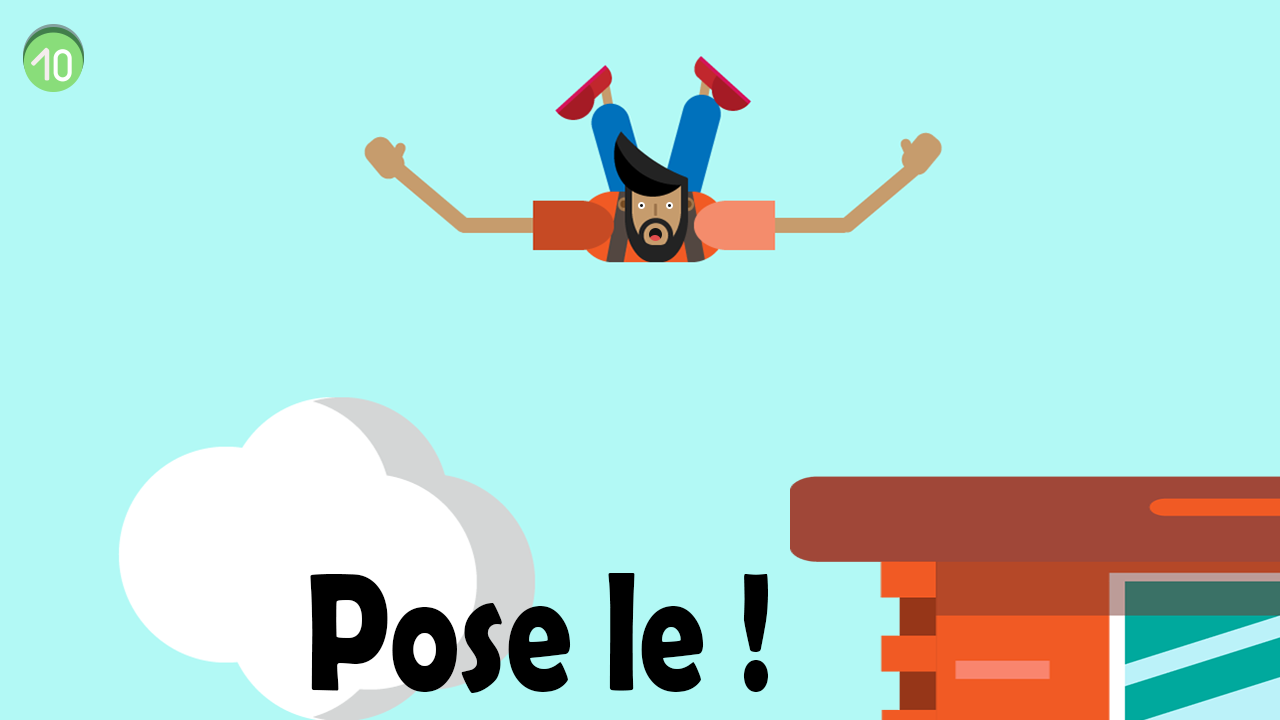
<style>
.page{position:relative;width:1280px;height:720px;background:#b2f9f5}
.page>*{position:absolute;margin:0}
.t1{font:170.4px "BerlinSansFBDemi-Bold";color:#000000;scale:0.77 1}
</style>
<div class="page">
<p class="t1" style="left:310px;top:573px;width:458px;height:120px">Pose le !</p>
</div>
